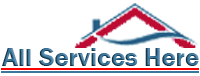
<style>
.page{position:relative;width:200px;height:76px;background:#ffffff}
.page>*{position:absolute;margin:0}
.t1{font:19.4px "FranklinGothic-Demi"}
</style>
<div class="page">
<p class="t1" style="left:2px;top:48px;width:197px;height:18px">All Services Here</p>
</div>
